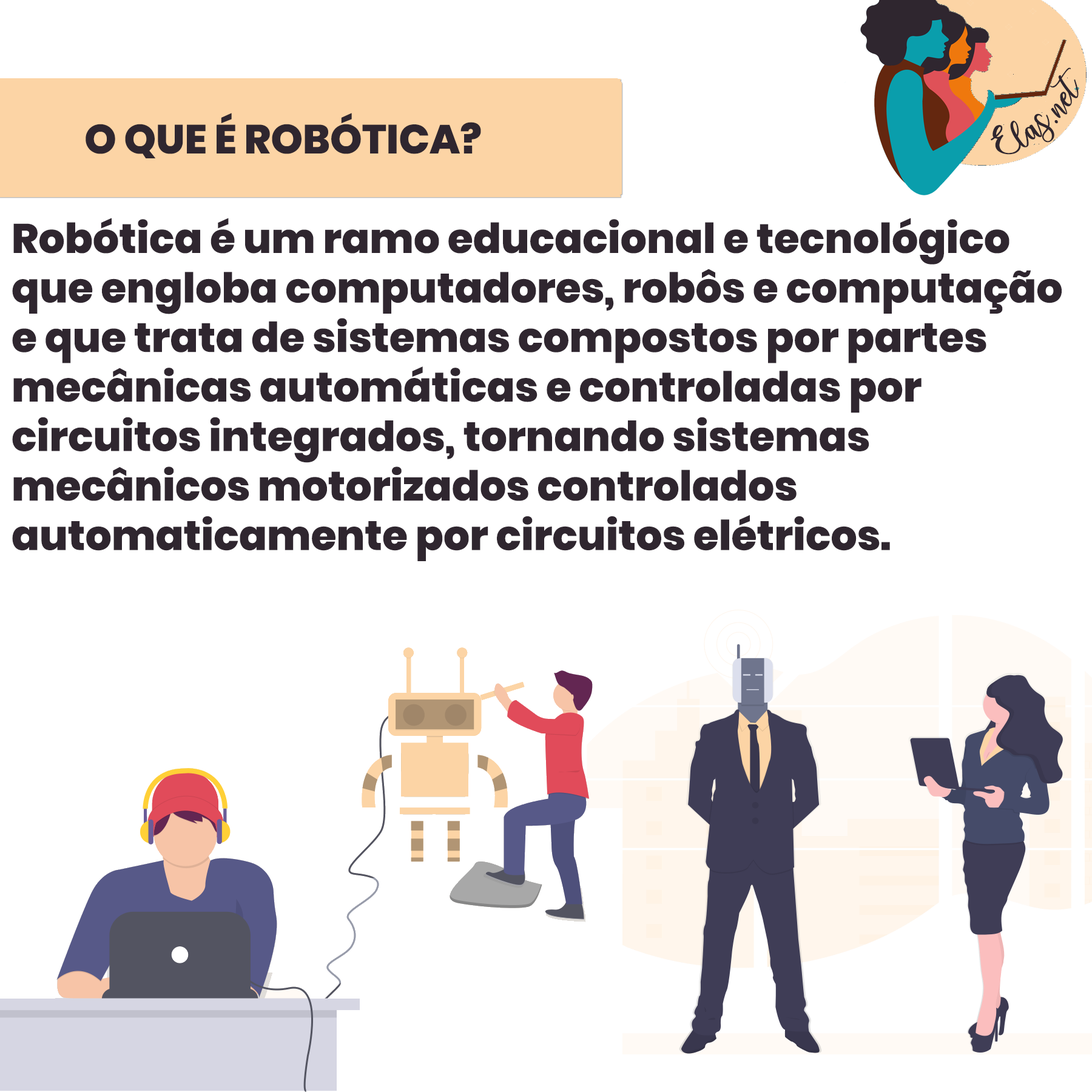
<style>
.page{position:relative;width:1092px;height:1092px;background:#ffffff}
.page>*{position:absolute;margin:0}
.t1{font:25px "charlinda-Regular";color:#2f262f;scale:1.18 1}
.t2{font:40.6px "Poppins-ExtraBold";color:#2f262f;text-transform:uppercase}
.t3{font:41.3px "Poppins-ExtraBold";color:#2f262f}
</style>
<div class="page">
<p class="t1" style="left:991px;top:67px;width:88px;height:88px;rotate:-42deg">Elas.net</p>
<p class="t2" style="left:86px;top:113px;width:395px;height:45px">O que É ROBÓTICA?</p>
<p class="t3" style="left:12px;top:218px;width:1050px;height:343px">Robótica é um ramo educacional e tecnológico<br>que engloba computadores, robôs e computação <br>e que trata de sistemas compostos por partes <br>mecânicas automáticas e controladas por <br>circuitos integrados, tornando sistemas <br>mecânicos motorizados controlados <br>automaticamente por circuitos elétricos.</p>
</div>
